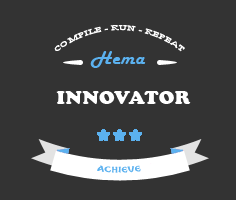
<style>
.page{position:relative;width:236px;height:200px;background:#333333}
.page>*{position:absolute;margin:0}
.t1{font:7.8px "BookAntiqua-Bold";letter-spacing:0.03em;color:#ffffff;scale:1.18 1}
.t2{font:19px "HarlowSolid";letter-spacing:0.01em;color:#5bb1ef;scale:1.07 1}
.t3{font:19px "CooperBlack";letter-spacing:0.01em;color:#ffffff;scale:1.07 1}
.t4{font:7.6px "BreatheFire";letter-spacing:0.085em;color:#5bb1ef;font-weight:bold;scale:1.29 1}
</style>
<div class="page">
<p class="t1" style="left:54px;top:25px;width:131px;height:27px;text-align:center">COMPILE - RUN - REPEAT</p>
<p class="t2" style="left:90px;top:51px;width:56px;height:17px">Hema</p>
<p class="t3" style="left:56px;top:91px;width:135px;height:13px">INNOVATOR</p>
<p class="t4" style="left:97px;top:165px;width:44px;height:8px">ACHIEVE</p>
</div>
